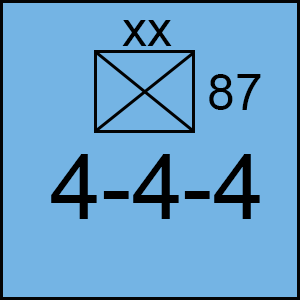
<style>
.page{position:relative;width:300px;height:300px;background:#74b4e4}
.page>*{position:absolute;margin:0}
.t1{font:50px "ArialMT";color:#000000}
.t2{font:91.7px "ArialMT";color:#000000}
</style>
<div class="page">
<p class="t1" style="left:122px;top:20px;width:50px;height:26px">xx</p>
<p class="t1" style="left:209px;top:74px;width:52px;height:36px">87</p>
<p class="t2" style="left:51px;top:154px;width:209px;height:65px">4-4-4</p>
</div>
